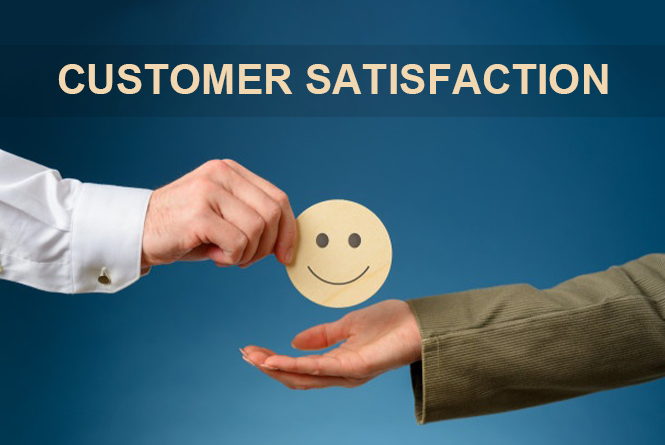
<style>
.page{position:relative;width:665px;height:445px}
.page>*{position:absolute;margin:0}
.t1{font:41.4px "Arial-BoldMT";color:#f1d8b0;text-transform:uppercase}
</style>
<div class="page">
<p class="t1" style="left:58px;top:64px;width:550px;height:30px">customer satisfaction</p>
</div>
